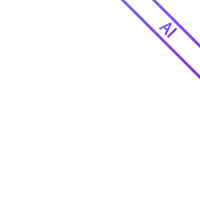
<style>
.page{position:relative;width:200px;height:200px;background:#ffffff}
.page>*{position:absolute;margin:0}
.t1{font:16px "SourceHanSansSC-Normal";color:#7a52f1;font-weight:bold}
</style>
<div class="page">
<p class="t1" style="left:159px;top:22px;width:18px;height:16px;rotate:45deg">AI</p>
</div>
